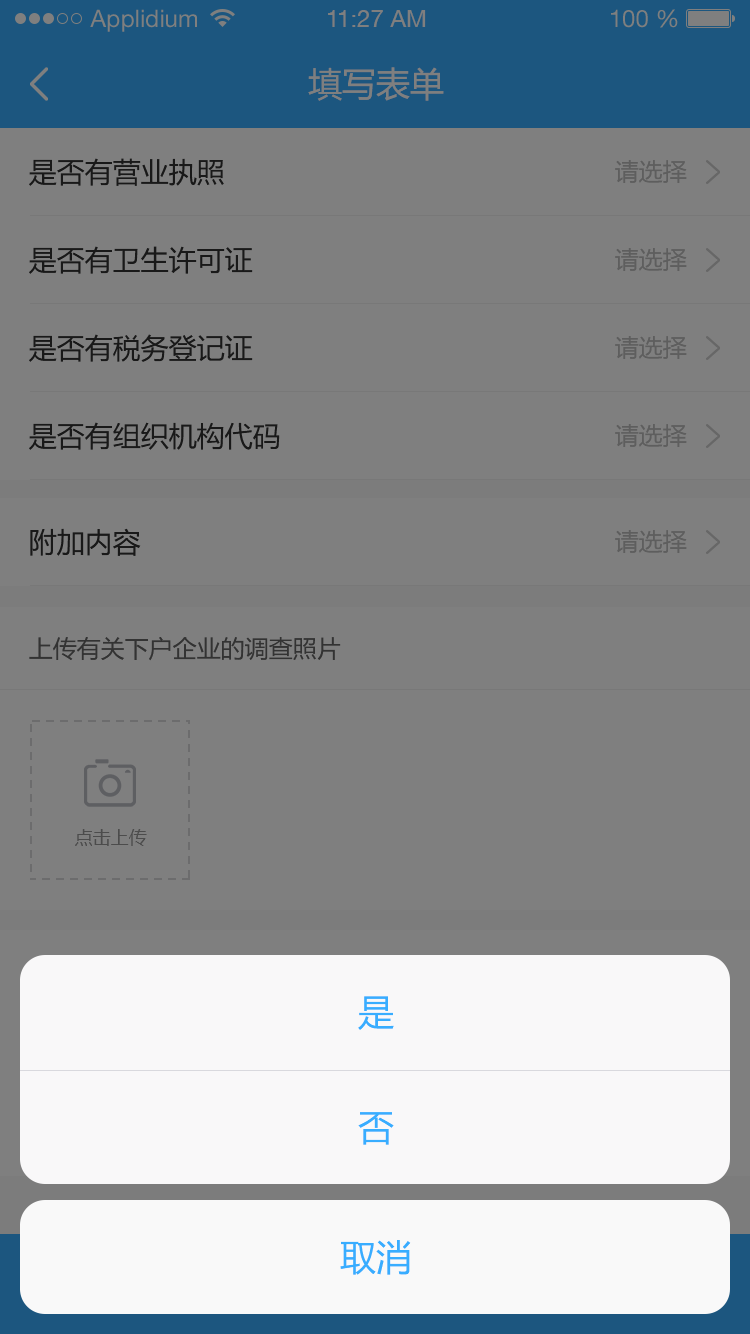
<style>
.page{position:relative;width:750px;height:1334px;background:#7f7f7f}
.page>*{position:absolute;margin:0}
.t1{font:24px "HelveticaNeueLTStd-Roman";color:#7f7f7f}
.t2{font:24px "HelveticaNeueCE-Roman";color:#7f7f7f}
.t3{font:34px "MicrosoftYaHei";color:#7f7f7f}
.t4{font:28px "MicrosoftYaHei";color:#191919}
.t5{font:24px "MicrosoftYaHei";color:#5e5e5e}
.t6{font:24px "MicrosoftYaHei";color:#333333}
.t7{font:18px "MicrosoftYaHei";color:#4c4c4c}
.t8{font:36px "MicrosoftYaHei";color:#38adff}
</style>
<div class="page">
<p class="t1" style="left:90px;top:9px;width:107px;height:23px">Applidium</p>
<p class="t2" style="left:328px;top:10px;width:98px;height:17px">11:27 AM</p>
<p class="t1" style="left:611px;top:9px;width:67px;height:19px">100 %</p>
<p class="t3" style="left:308px;top:67px;width:136px;height:34px">填写表单</p>
<p class="t4" style="left:29px;top:158px;width:195px;height:28px">是否有营业执照</p>
<p class="t5" style="left:615px;top:160px;width:72px;height:23px">请选择</p>
<p class="t4" style="left:29px;top:246px;width:224px;height:28px">是否有卫生许可证</p>
<p class="t5" style="left:615px;top:248px;width:72px;height:23px">请选择</p>
<p class="t4" style="left:29px;top:334px;width:224px;height:28px">是否有税务登记证</p>
<p class="t5" style="left:615px;top:336px;width:72px;height:23px">请选择</p>
<p class="t4" style="left:29px;top:422px;width:251px;height:28px">是否有组织机构代码</p>
<p class="t5" style="left:615px;top:424px;width:72px;height:23px">请选择</p>
<p class="t4" style="left:30px;top:528px;width:111px;height:28px">附加内容</p>
<p class="t5" style="left:615px;top:530px;width:72px;height:23px">请选择</p>
<p class="t6" style="left:29px;top:637px;width:312px;height:24px">上传有关下户企业的调查照片</p>
<p class="t7" style="left:75px;top:829px;width:72px;height:17px">点击上传</p>
<p class="t8" style="left:358px;top:996px;width:36px;height:34px">是</p>
<p class="t8" style="left:358px;top:1112px;width:36px;height:33px">否</p>
<p class="t8" style="left:340px;top:1240px;width:71px;height:35px">取消</p>
</div>
